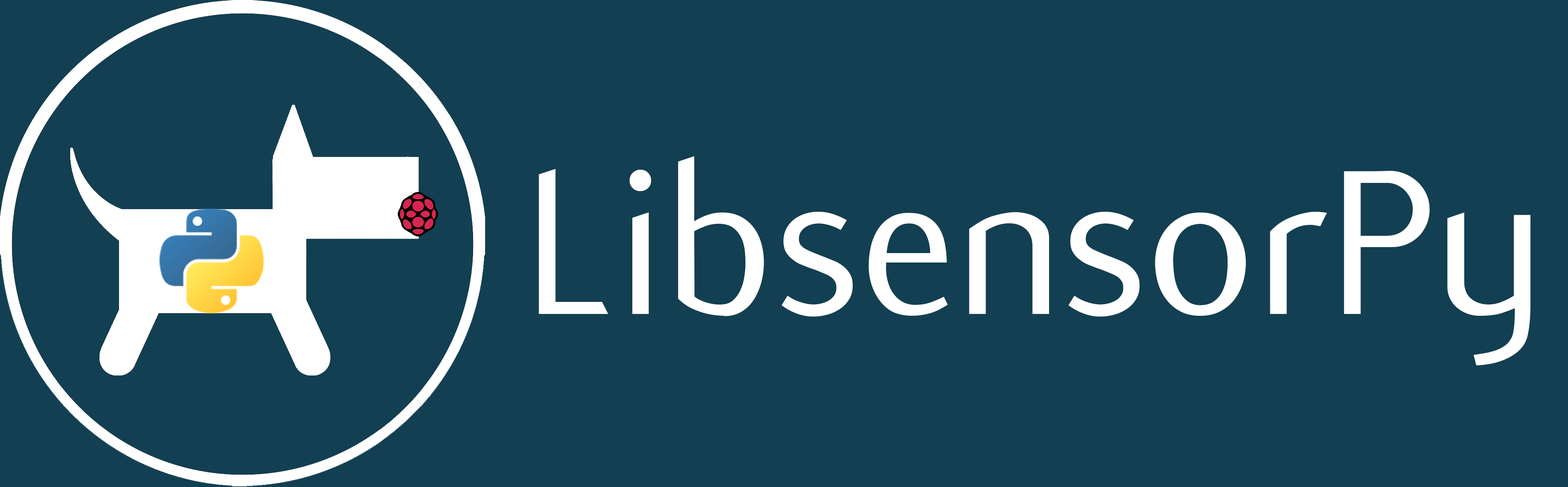
<style>
.page{position:relative;width:1568px;height:487px;background:#133f52}
.page>*{position:absolute;margin:0}
.t1{font:226px "Flux";color:#ffffff}
</style>
<div class="page">
<p class="t1" style="left:539px;top:156px;width:991px;height:209px">LibsensorPy</p>
</div>
